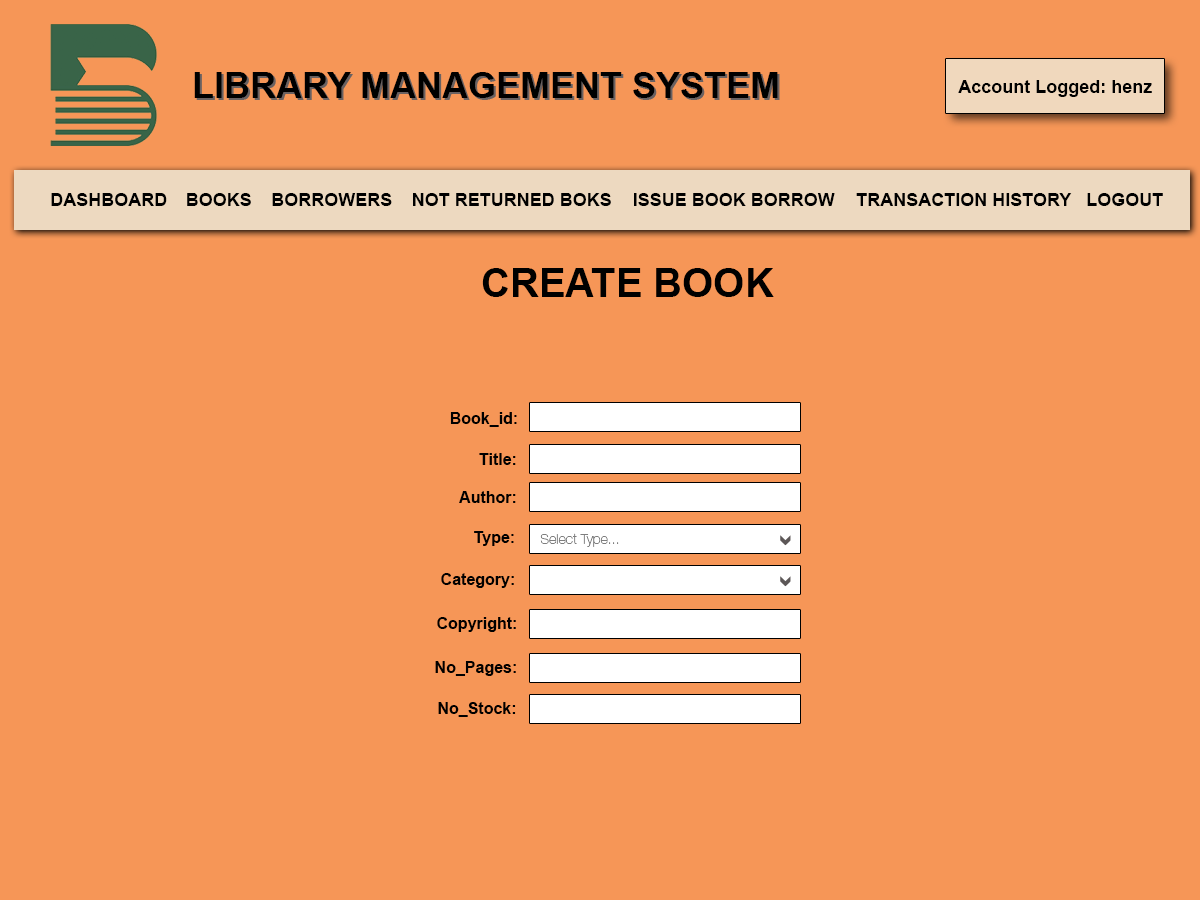
<style>
.page{position:relative;width:1200px;height:900px;background:#f69657}
.page>*{position:absolute;margin:0}
.t1{font:36px "Arial-BoldMT";color:#000000}
.t2{font:18px "Arial-BoldMT";color:#000000}
.t3{font:40px "Arial-BoldMT";color:#000000}
.t4{font:16px "Arial-BoldMT";color:#000000}
.t5{font:14px "HelveticaNeueLTStd-Th";color:#7e7e7e}
</style>
<div class="page">
<p class="t1" style="left:194px;top:72px;width:584px;height:26px">LIBRARY MANAGEMENT SYSTEM</p>
<p class="t2" style="left:958px;top:80px;width:194px;height:17px">Account Logged: henz</p>
<p class="t2" style="left:51px;top:193px;width:116px;height:13px">DASHBOARD</p>
<p class="t2" style="left:187px;top:193px;width:64px;height:13px">BOOKS</p>
<p class="t2" style="left:272px;top:193px;width:120px;height:13px">BORROWERS</p>
<p class="t2" style="left:413px;top:193px;width:198px;height:13px">NOT RETURNED BOKS</p>
<p class="t2" style="left:634px;top:193px;width:201px;height:13px">ISSUE BOOK BORROW</p>
<p class="t2" style="left:856px;top:193px;width:216px;height:13px">TRANSACTION HISTORY</p>
<p class="t2" style="left:1087px;top:193px;width:76px;height:13px">LOGOUT</p>
<p class="t3" style="left:482px;top:268px;width:292px;height:29px">CREATE BOOK</p>
<p class="t4" style="left:450px;top:412px;width:67px;height:15px">Book_id:</p>
<p class="t4" style="left:479px;top:453px;width:37px;height:12px">Title:</p>
<p class="t4" style="left:459px;top:491px;width:57px;height:12px">Author:</p>
<p class="t4" style="left:474px;top:531px;width:40px;height:15px">Type:</p>
<p class="t5" style="left:540px;top:533px;width:79px;height:14px">Select Type...</p>
<p class="t4" style="left:441px;top:573px;width:73px;height:15px">Category:</p>
<p class="t4" style="left:437px;top:617px;width:79px;height:15px">Copyright:</p>
<p class="t4" style="left:435px;top:661px;width:81px;height:15px">No_Pages:</p>
<p class="t4" style="left:438px;top:702px;width:78px;height:15px">No_Stock:</p>
</div>
